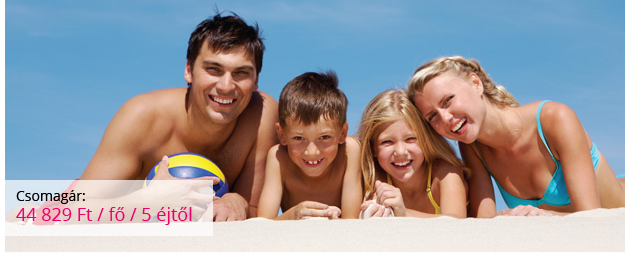
<style>
.page{position:relative;width:625px;height:256px}
.page>*{position:absolute;margin:0}
.t1{font:18px/20px "OpenSans";color:#ec006e}
.t2{font:14px/20px "OpenSans";color:#000000}
</style>
<div class="page">
<p class="t1" style="left:16px;top:190px;width:176px;height:35px"><span class="t2">Csomagár: <br></span>44 829 Ft / fő / 5 éjtől</p>
</div>
